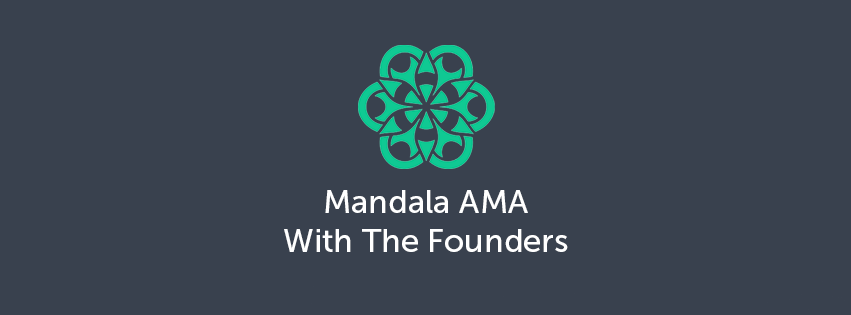
<style>
.page{position:relative;width:851px;height:315px;background:#39414e}
.page>*{position:absolute;margin:0}
.t1{font:32.7px "MuseoSans-500";color:#ffffff}
</style>
<div class="page">
<p class="t1" style="left:284px;top:190px;width:284px;height:62px;text-align:center">Mandala AMA<br>With The Founders</p>
</div>
